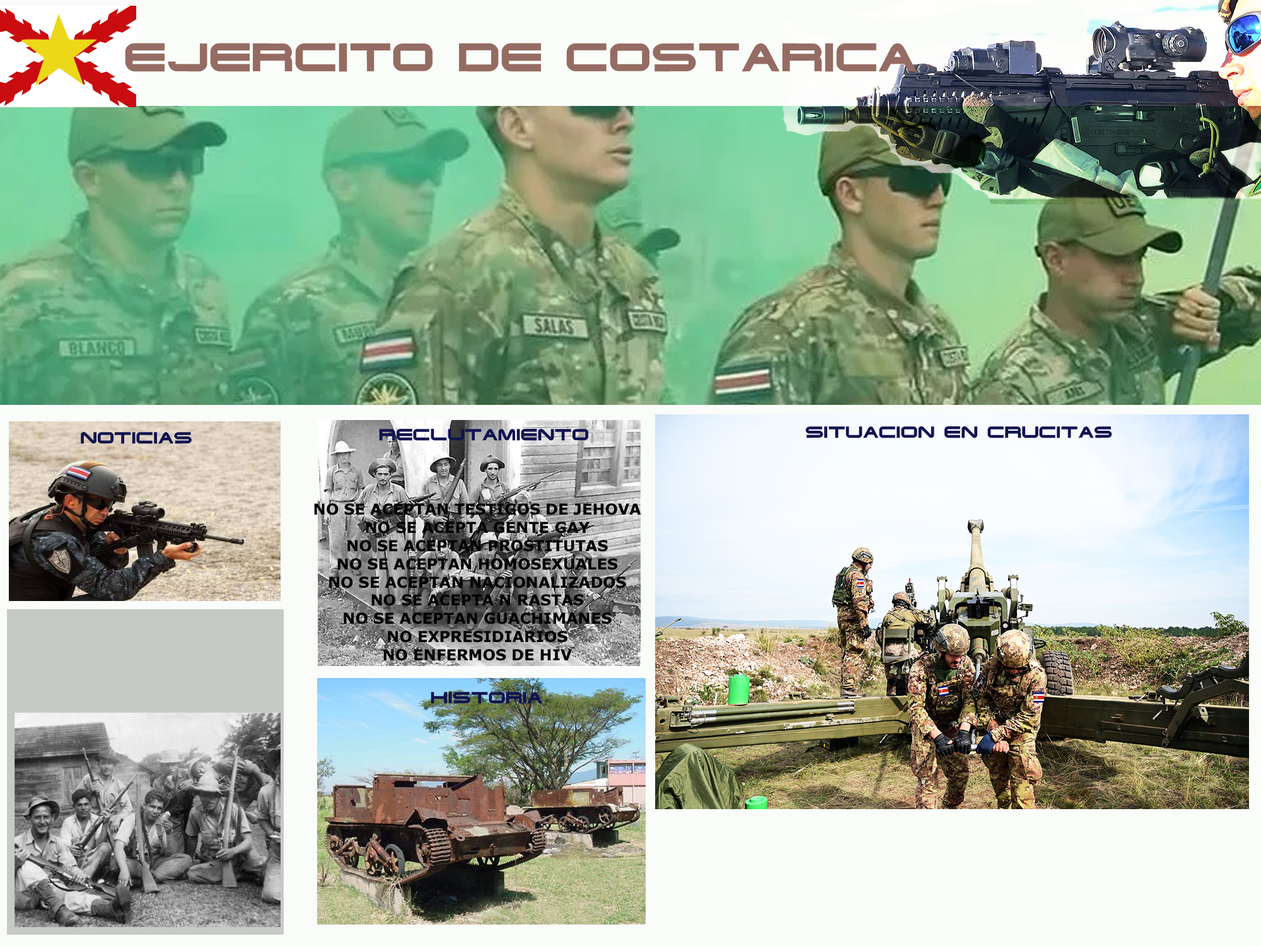
<style>
.page{position:relative;width:1261px;height:946px}
.page>*{position:absolute;margin:0}
.t1{font:37.8px "Terminator";color:#956c63}
.t2{font:15.1px "Terminator";color:#121450}
.t3{font:15.1px "Verdana-Bold";color:#040404}
</style>
<div class="page">
<p class="t1" style="left:125px;top:43px;width:792px;height:29px">EJERCITO DE COSTARICA</p>
<p class="t2" style="left:81px;top:432px;width:111px;height:12px">NOTICIAS</p>
<p class="t2" style="left:379px;top:429px;width:209px;height:12px">RECLUTAMIENTO</p>
<p class="t2" style="left:806px;top:426px;width:306px;height:12px">SITUACION EN CRUCITAS</p>
<p class="t3" style="left:314px;top:503px;width:327px;height:158px;text-align:center">NO SE ACEPTAN TESTIGOS DE JEHOVA<br>NO SE ACEPTA GENTE GAY<br>NO SE ACEPTAN PROSTITUTAS<br>NO SE ACEPTAN HOMOSEXUALES<br>NO SE ACEPTAN NACIONALIZADOS<br>NO SE ACEPTA N RASTAS<br>NO SE ACEPTAN GUACHIMANES<br>NO EXPRESIDIARIOS<br>NO ENFERMOS DE HIV</p>
<p class="t2" style="left:431px;top:692px;width:111px;height:12px">HISTORIA</p>
</div>
